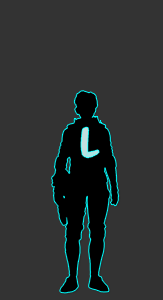
<style>
.page{position:relative;width:163px;height:300px;background:#333333}
.page>*{position:absolute;margin:0}
.t1{font:35.9px "ScriptoramaMarkdownJF-Regular";color:#c4dede}
</style>
<div class="page">
<p class="t1" style="left:81px;top:127px;width:18px;height:31px">L</p>
</div>
